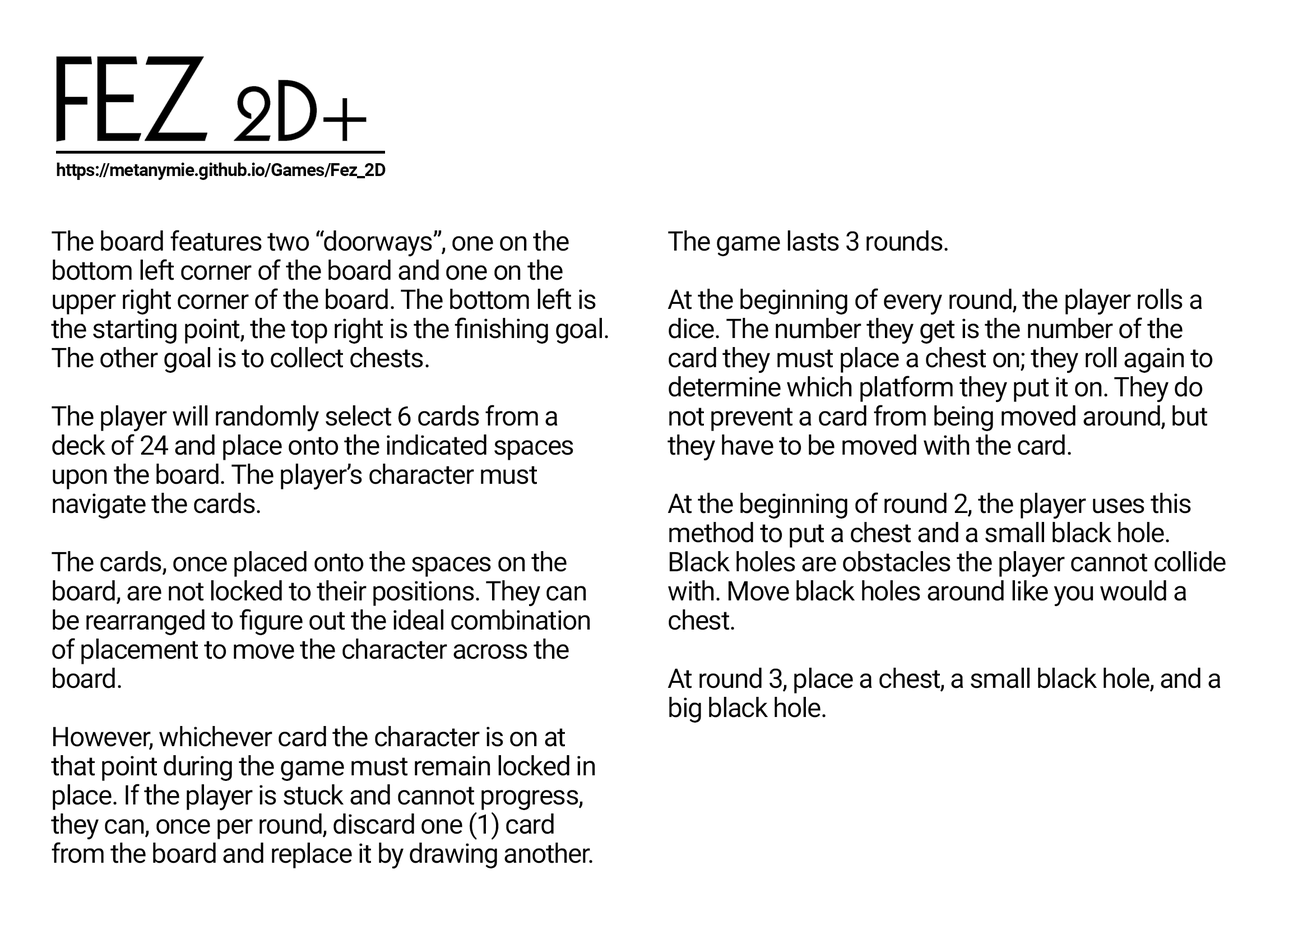
<style>
.page{position:relative;width:1289px;height:925px;background:#ffffff}
.page>*{position:absolute;margin:0}
.t1{font:17.9px "Roboto-Bold";letter-spacing:-0.032em;color:#010101}
.t2{font:26.9px/29.1px "Roboto-Regular";letter-spacing:-0.032em;color:#000000}
</style>
<div class="page">
<p class="t1" style="left:57px;top:163px;width:329px;height:17px">https://metanymie.github.io/Games/Fez_2D</p>
<p class="t2" style="left:51px;top:230px;width:557px;height:639px">The board features two “doorways”, one on the bottom left corner of the board and one on the upper right corner of the board. The bottom left is the starting point, the top right is the finishing goal. The other goal is to collect chests.<br><br>The player will randomly select 6 cards from a deck of 24 and place onto the indicated spaces upon the board. The player’s character must<br>navigate the cards.<br><br>The cards, once placed onto the spaces on the board, are not locked to their positions. They can be rearranged to figure out the ideal combination of placement to move the character across the board.<br><br>However, whichever card the character is on at that point during the game must remain locked in place. If the player is stuck and cannot progress, they can, once per round, discard one (1) card from the board and replace it by drawing another.</p>
<p class="t2" style="left:668px;top:230px;width:558px;height:493px">The game lasts 3 rounds.<br><br>At the beginning of every round, the player rolls a dice. The number they get is the number of the card they must place a chest on; they roll again to determine which platform they put it on. They do not prevent a card from being moved around, but they have to be moved with the card.<br><br>At the beginning of round 2, the player uses this method to put a chest and a small black hole. Black holes are obstacles the player cannot collide with. Move black holes around like you would a chest.<br><br>At round 3, place a chest, a small black hole, and a big black hole.</p>
</div>
